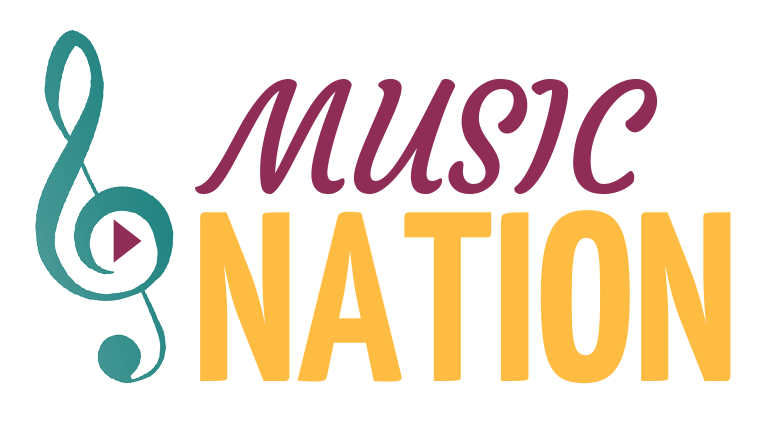
<style>
.page{position:relative;width:771px;height:428px;background:#ffffff}
.page>*{position:absolute;margin:0}
.t1{font:150.4px "Courgette-Regular";color:#8f2d56;text-transform:uppercase}
.t2{font:241.5px "YanoneKaffeesatz-Bold";color:#ffbc42;text-transform:uppercase}
</style>
<div class="page">
<p class="t1" style="left:195px;top:79px;width:463px;height:115px">Music</p>
<p class="t2" style="left:200px;top:210px;width:531px;height:174px">NATION</p>
</div>
